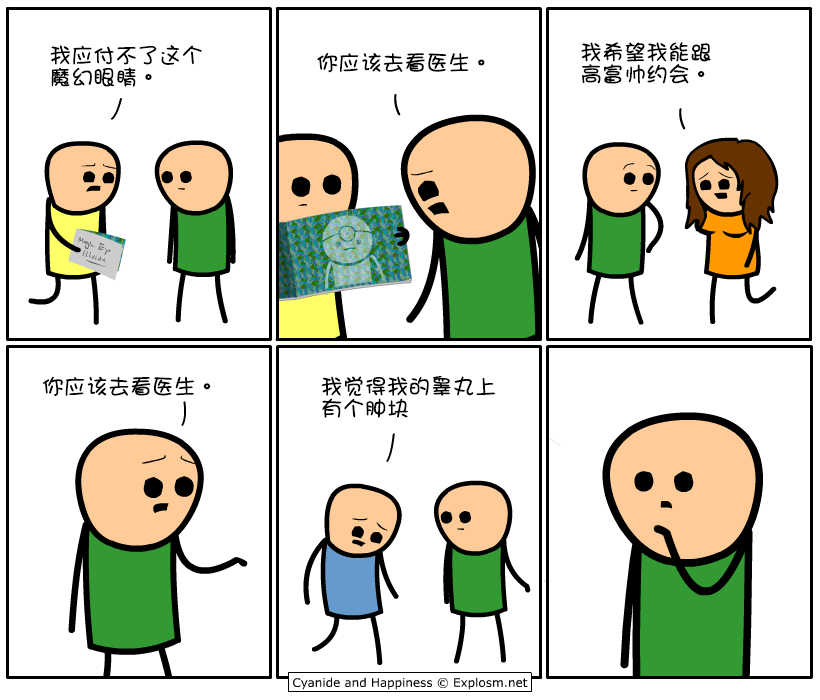
<style>
.page{position:relative;width:820px;height:700px;background:#ffffff}
.page>*{position:absolute;margin:0}
.t1{font:22px/22px "DFGirl";color:#000000}
.t2{font:22px "DFGirl";color:#000000}
</style>
<div class="page">
<p class="t1" style="left:50px;top:45px;width:152px;height:42px">我应付不了这个<br>魔幻眼睛。</p>
<p class="t2" style="left:317px;top:53px;width:168px;height:20px">你应该去看医生。</p>
<p class="t1" style="left:581px;top:42px;width:130px;height:42px">我希望我能跟<br>高富帅约会。</p>
<p class="t2" style="left:43px;top:376px;width:168px;height:20px">你应该去看医生。</p>
<p class="t1" style="left:321px;top:376px;width:174px;height:42px">我觉得我的睾丸上<br>有个肿块</p>
</div>
